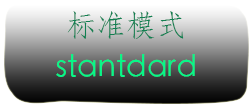
<style>
.page{position:relative;width:251px;height:106px}
.page>*{position:absolute;margin:0}
.t1{font:30px "STFangsong";color:#108051}
.t2{font:30px "STHeitiSC-Light";color:#07f888}
</style>
<div class="page">
<p class="t1" style="left:67px;top:11px;width:117px;height:28px">标准模式</p>
<p class="t2" style="left:56px;top:54px;width:139px;height:23px">stantdard</p>
</div>
